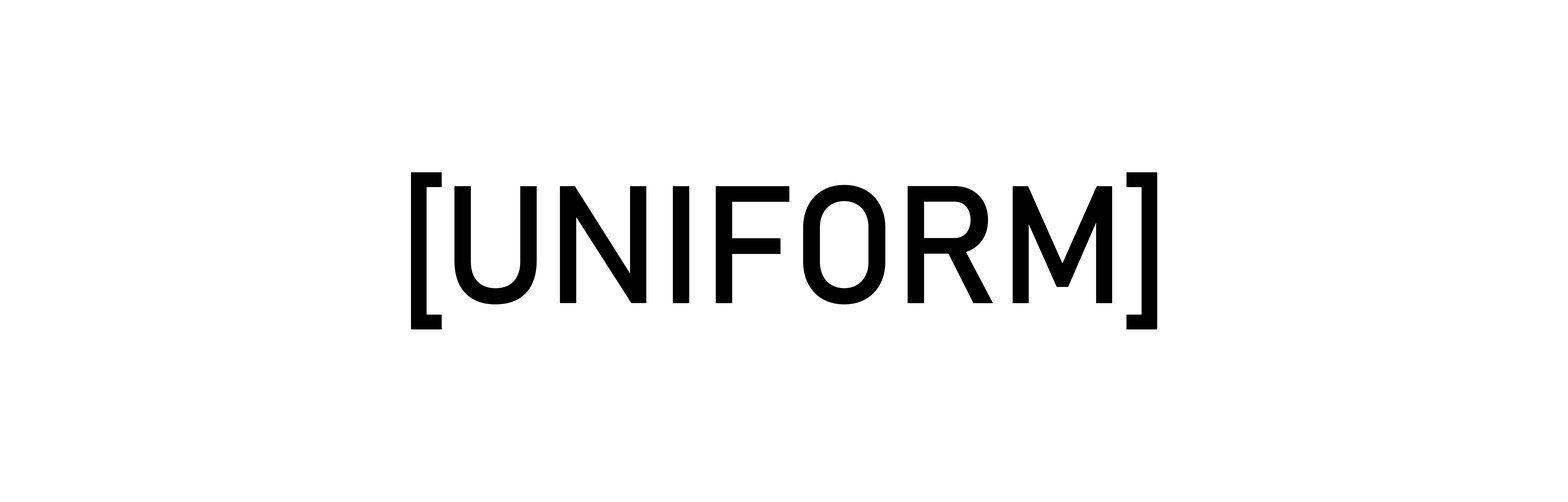
<style>
.page{position:relative;width:1568px;height:502px;background:#ffffff}
.page>*{position:absolute;margin:0}
.t1{font:164.8px "Bahnschrift";letter-spacing:-0.015em;color:#000000}
</style>
<div class="page">
<p class="t1" style="left:411px;top:172px;width:746px;height:157px">[UNIFORM]</p>
</div>
